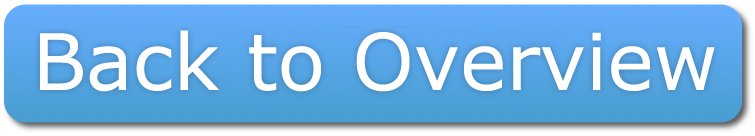
<style>
.page{position:relative;width:755px;height:136px}
.page>*{position:absolute;margin:0}
.t1{font:78px "Verdana";color:#ffffff}
</style>
<div class="page">
<p class="t1" style="left:40px;top:30px;width:675px;height:62px">Back to Overview</p>
</div>
